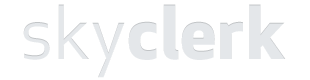
<style>
.page{position:relative;width:310px;height:80px;background:#ffffff}
.page>*{position:absolute;margin:0}
.t1{font:72.5px "ApexNew-Bold";letter-spacing:0.005em;color:#e4e7ea}
.t2{font:72.5px "ApexNew-Book";letter-spacing:0.005em;color:#e4e7ea}
</style>
<div class="page">
<p class="t1" style="left:23px;top:4px;width:263px;height:74px"><span class="t2">sky</span>clerk</p>
</div>
